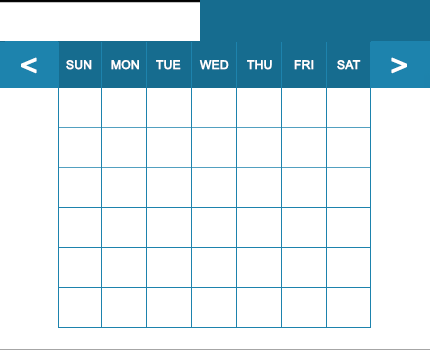
<style>
.page{position:relative;width:430px;height:350px;background:#ffffff}
.page>*{position:absolute;margin:0}
.t1{font:30px "ArialMT";color:#ffffff;font-weight:bold}
.t2{font:12px "ArialMT";color:#ffffff;font-weight:bold}
</style>
<div class="page">
<p class="t1" style="left:21px;top:57px;width:16px;height:17px">&lt;</p>
<p class="t2" style="left:66px;top:60px;width:26px;height:10px">SUN</p>
<p class="t2" style="left:111px;top:60px;width:28px;height:10px">MON</p>
<p class="t2" style="left:156px;top:60px;width:25px;height:10px">TUE</p>
<p class="t2" style="left:199px;top:60px;width:30px;height:10px">WED</p>
<p class="t2" style="left:247px;top:60px;width:25px;height:10px">THU</p>
<p class="t2" style="left:294px;top:60px;width:20px;height:10px">FRI</p>
<p class="t2" style="left:337px;top:60px;width:24px;height:10px">SAT</p>
<p class="t1" style="left:391px;top:57px;width:16px;height:17px;rotate:180deg">&lt;</p>
</div>
